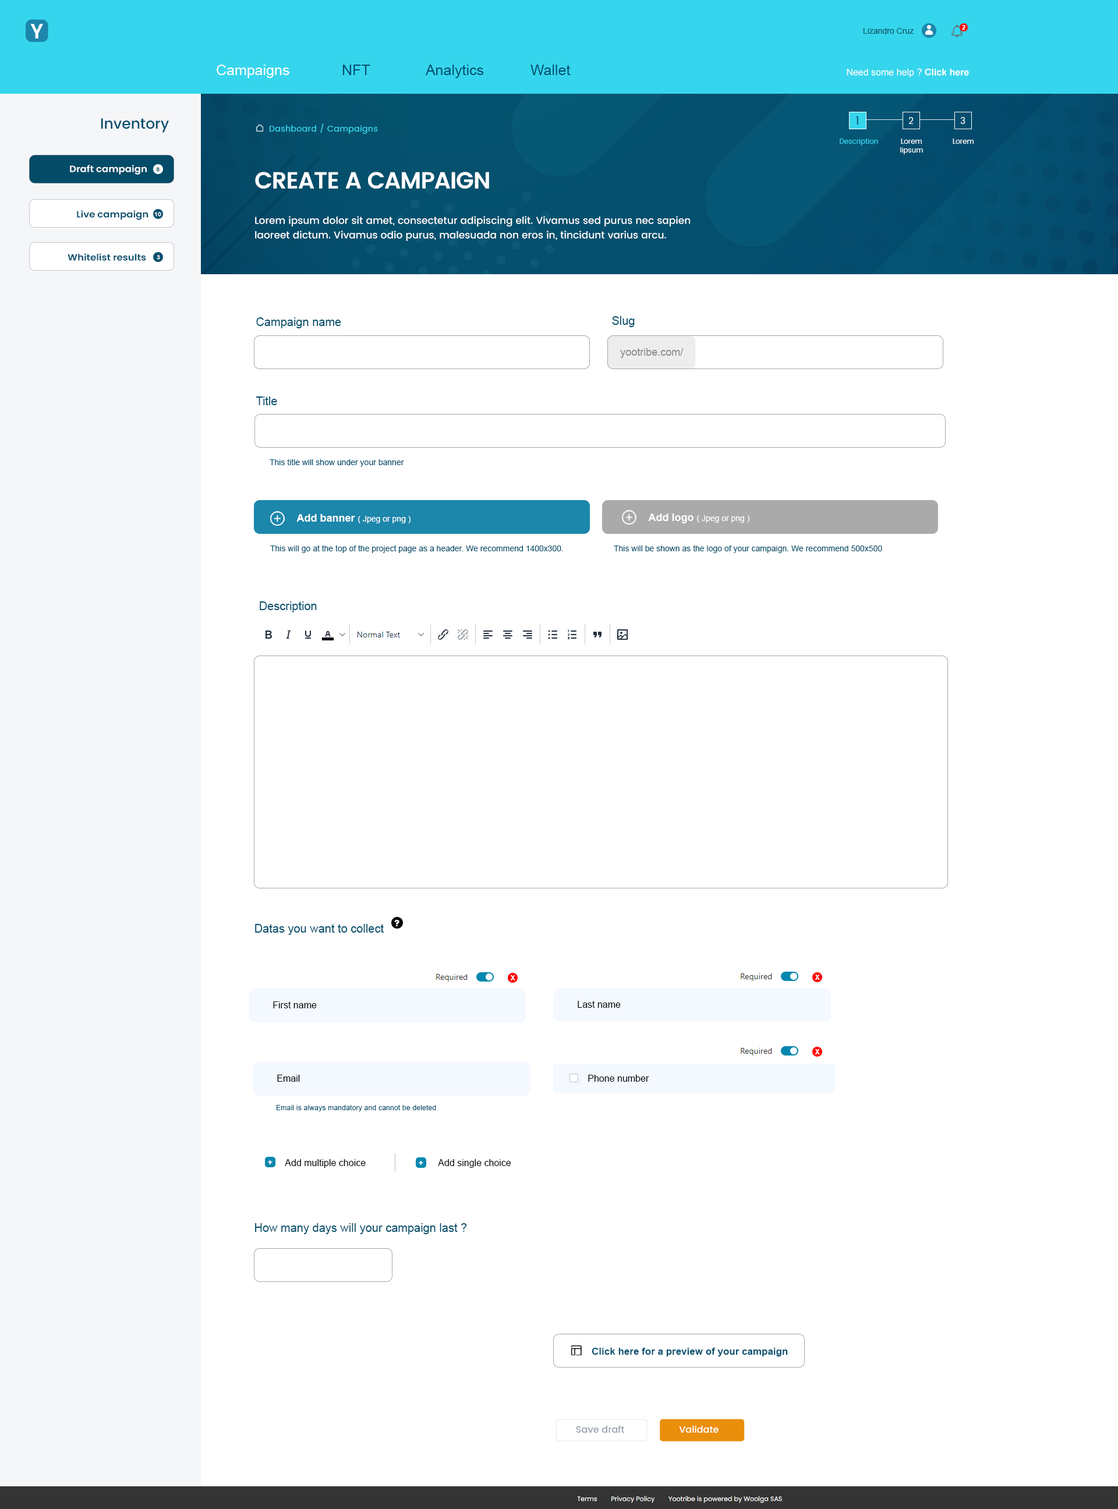
<style>
.page{position:relative;width:1118px;height:1509px;background:#ffffff}
.page>*{position:absolute;margin:0}
.t1{font:20.4px "Poppins-SemiBold";color:#ffffff}
.t2{font:8.1px "ArialMT";color:#105761}
.t3{font:6.4px "Arial-BoldMT";color:#ffffff}
.t4{font:14.6px "ArialMT";color:#044d6e}
.t5{font:14.6px "ArialMT";color:#ffffff}
.t6{font:9.3px "ArialMT";color:#ffffff}
.t7{font:9.3px "Arial-BoldMT";color:#ffffff}
.t8{font:14.6px "Poppins-Medium";color:#05506d}
.t9{font:8.1px "Poppins-Regular";letter-spacing:0.04em;color:#38d8ec}
.t10{font:11.6px "Poppins-Regular";color:#044f6e}
.t11{font:8.7px "Poppins-Regular";color:#ffffff}
.t12{font:7px "Poppins-Regular";color:#35d6ed}
.t13{font:7px/8.7px "Poppins-Regular";color:#ffffff}
.t14{font:7px "Poppins-Regular";color:#ffffff}
.t15{font:9px "Poppins-SemiBold";color:#ffffff;scale:1.07 1}
.t16{font:5.8px "Arial-BoldMT";color:#044b67;scale:1.07 1}
.t17{font:5.8px "Poppins-SemiBold";color:#044b67;scale:1.07 1}
.t18{font:23.3px "Poppins-SemiBold";letter-spacing:-0.03em;color:#ffffff}
.t19{font:9px "Poppins-SemiBold";color:#044f6e;scale:1.07 1}
.t20{font:5.8px "Arial-BoldMT";color:#f8f9fb;scale:1.07 1}
.t21{font:9.9px/14.6px "Poppins-Medium";color:#ffffff}
.t22{font:11.6px "ArialMT";color:#04506e}
.t23{font:10.5px "ArialMT";color:#8d8d8d}
.t24{font:8.1px "ArialMT";color:#04506e}
.t25{font:8.1px "ArialMT";color:#ffffff}
.t26{font:10.5px "Arial-BoldMT";color:#ffffff}
.t27{font:7px "Arial-BoldMT";color:#ffffff}
.t28{font:9.3px "ArialMT";color:#000000}
.t29{font:7px "ArialMT";letter-spacing:0.02em;color:#04506e}
.t30{font:8.1px "Poppins-SemiBold";color:#ffffff}
.t31{font:9.9px "Arial-BoldMT";color:#04506e}
.t32{font:9.3px "Poppins-Medium";color:#9aa2af}
.t33{font:9.3px "Poppins-Medium";color:#ffffff}
</style>
<div class="page">
<p class="t1" style="left:30px;top:24px;width:13px;height:14px">Y</p>
<p class="t2" style="left:863px;top:28px;width:51px;height:6px">Lizandro Cruz</p>
<p class="t3" style="left:962px;top:25px;width:3px;height:5px">2</p>
<p class="t4" style="left:217px;top:65px;width:353px;height:13px"><span class="t5">Campaigns   </span>NFT   Analytics   Wallet</p>
<p class="t6" style="left:846px;top:68px;width:123px;height:9px">Need some help ? <span class="t7">Click here</span></p>
<p class="t8" style="left:101px;top:118px;width:68px;height:15px">Inventory</p>
<p class="t9" style="left:269px;top:123px;width:109px;height:11px">Dashboard / Campaigns</p>
<p class="t10" style="left:856px;top:116px;width:2px;height:9px">1</p>
<p class="t11" style="left:909px;top:117px;width:4px;height:7px">2</p>
<p class="t11" style="left:960px;top:117px;width:5px;height:7px">3</p>
<p class="t12" style="left:839px;top:139px;width:39px;height:7px">Description</p>
<p class="t13" style="left:900px;top:139px;width:23px;height:15px;text-align:center">Lorem<br>lipsum</p>
<p class="t14" style="left:952px;top:139px;width:21px;height:5px">Lorem</p>
<p class="t15" style="left:70px;top:165px;width:77px;height:10px">Draft campaign</p>
<p class="t16" style="left:156px;top:167px;width:3px;height:5px"><span class="t17"> </span>8</p>
<p class="t18" style="left:255px;top:172px;width:234px;height:17px">CREATE A CAMPAIGN</p>
<p class="t19" style="left:77px;top:210px;width:71px;height:10px">Live campaign</p>
<p class="t20" style="left:154px;top:212px;width:7px;height:5px">10</p>
<p class="t21" style="left:255px;top:216px;width:435px;height:25px">Lorem ipsum dolor sit amet, consectetur adipiscing elit. Vivamus sed purus nec sapien laoreet dictum. Vivamus odio purus, malesuada non eros in, tincidunt varius arcu.</p>
<p class="t19" style="left:68px;top:253px;width:78px;height:8px">Whitelist results</p>
<p class="t20" style="left:157px;top:255px;width:3px;height:5px">3</p>
<p class="t22" style="left:256px;top:317px;width:85px;height:11px">Campaign name</p>
<p class="t22" style="left:612px;top:316px;width:22px;height:11px">Slug</p>
<p class="t23" style="left:620px;top:348px;width:63px;height:10px">yootribe.com/</p>
<p class="t22" style="left:256px;top:396px;width:21px;height:9px">Title</p>
<p class="t24" style="left:270px;top:459px;width:134px;height:8px">This title will show under your banner</p>
<p class="t25" style="left:296px;top:514px;width:114px;height:9px"><span class="t26">Add banner </span>( Jpeg or png )</p>
<p class="t25" style="left:648px;top:513px;width:101px;height:10px"><span class="t26">Add logo </span>( Jpeg or png )</p>
<p class="t24" style="left:270px;top:545px;width:293px;height:8px">This will go at the top of the project page as a header. We recommend 1400x300.</p>
<p class="t24" style="left:614px;top:545px;width:268px;height:8px">This will be shown as the logo of your campaign. We recommend 500x500</p>
<p class="t22" style="left:260px;top:601px;width:57px;height:11px">Description</p>
<p class="t22" style="left:255px;top:924px;width:129px;height:11px">Datas you want to collect</p>
<p class="t27" style="left:510px;top:975px;width:5px;height:5px">X</p>
<p class="t27" style="left:814px;top:974px;width:6px;height:6px">X</p>
<p class="t28" style="left:273px;top:1001px;width:44px;height:7px">First name</p>
<p class="t28" style="left:577px;top:1001px;width:44px;height:7px">Last name</p>
<p class="t28" style="left:277px;top:1075px;width:23px;height:7px">Email</p>
<p class="t28" style="left:588px;top:1075px;width:61px;height:7px">Phone number</p>
<p class="t29" style="left:276px;top:1105px;width:160px;height:6px">Email is always mandatory and cannot be deleted</p>
<p class="t30" style="left:268px;top:1160px;width:4px;height:4px">+</p>
<p class="t28" style="left:285px;top:1159px;width:81px;height:9px">Add multiple choice</p>
<p class="t30" style="left:419px;top:1161px;width:4px;height:4px">+</p>
<p class="t28" style="left:438px;top:1159px;width:73px;height:9px">Add single choice</p>
<p class="t22" style="left:255px;top:1223px;width:212px;height:11px">How many days will your campaign last ?</p>
<p class="t31" style="left:591px;top:1348px;width:197px;height:8px">Click here for a preview of your campaign</p>
<p class="t32" style="left:576px;top:1426px;width:49px;height:7px">Save draft</p>
<p class="t33" style="left:679px;top:1426px;width:39px;height:7px">Validate</p>
</div>
